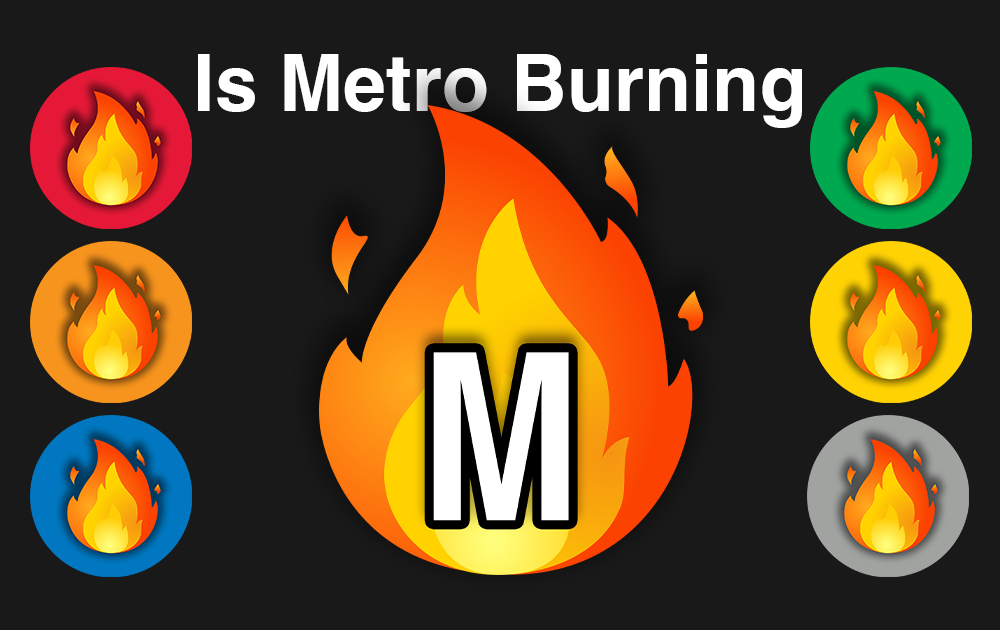
<style>
.page{position:relative;width:1000px;height:630px;background:#191919}
.page>*{position:absolute;margin:0}
.t1{font:78.9px "Helvetica-Bold";color:#ffffff}
</style>
<div class="page">
<p class="t1" style="left:198px;top:54px;width:604px;height:74px">Is Metro Burning</p>
</div>
